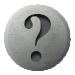
<style>
.page{position:relative;width:75px;height:75px;background:#ffffff}
.page>*{position:absolute;margin:0}
.t1{font:90.3px "Kokila-Bold"}
</style>
<div class="page">
<p class="t1" style="left:24px;top:14px;width:27px;height:48px">?</p>
</div>
